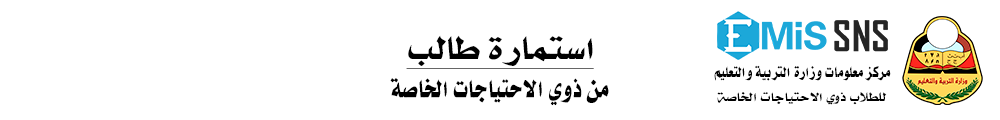
<style>
.page{position:relative;width:1000px;height:120px;background:#ffffff}
.page>*{position:absolute;margin:0}
.t1{font:37.5px "AXtShareQ";color:#000000;text-transform:uppercase;text-decoration:underline}
.t2{font:17px "AXtShareQXL";color:#000000;text-transform:uppercase}
.t3{font:28.5px "AXtShareQXL";color:#000000;text-transform:uppercase}
.t4{font:13.6px "mohammad-bold-art-1";color:#000000;text-transform:uppercase}
</style>
<div class="page">
<p class="t1" style="left:406px;top:35px;width:188px;height:34px">استمارة طالب</p>
<p class="t2" style="left:714px;top:65px;width:177px;height:16px">مركز معلومات وزارة التربية والتعليم</p>
<p class="t3" style="left:390px;top:78px;width:219px;height:28px">من ذوي الاحتياجات الخاصة</p>
<p class="t4" style="left:717px;top:92px;width:170px;height:13px">للطلاب ذوي الاحتياجات الخاصة</p>
</div>
